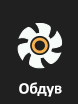
<style>
.page{position:relative;width:78px;height:104px;background:#202020}
.page>*{position:absolute;margin:0}
.t1{font:12px "Calibri-Bold";color:#ffffff}
</style>
<div class="page">
<p class="t1" style="left:19px;top:82px;width:43px;height:15px">Обдув</p>
</div>
